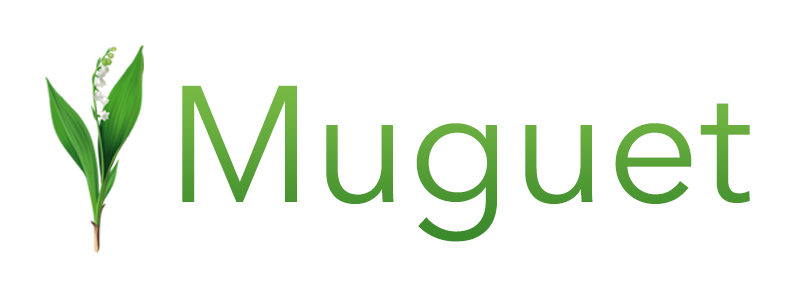
<style>
.page{position:relative;width:800px;height:300px;background:#ffffff}
.page>*{position:absolute;margin:0}
.t1{font:164px "AvenirNext-Regular";color:#57a231}
</style>
<div class="page">
<p class="t1" style="left:182px;top:85px;width:568px;height:157px">Muguet</p>
</div>
